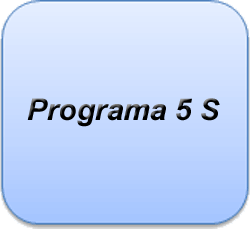
<style>
.page{position:relative;width:250px;height:229px}
.page>*{position:absolute;margin:0}
.t1{font:30px "Arial-BoldItalicMT";color:#000000}
</style>
<div class="page">
<p class="t1" style="left:27px;top:98px;width:193px;height:29px">Programa 5 S</p>
</div>
